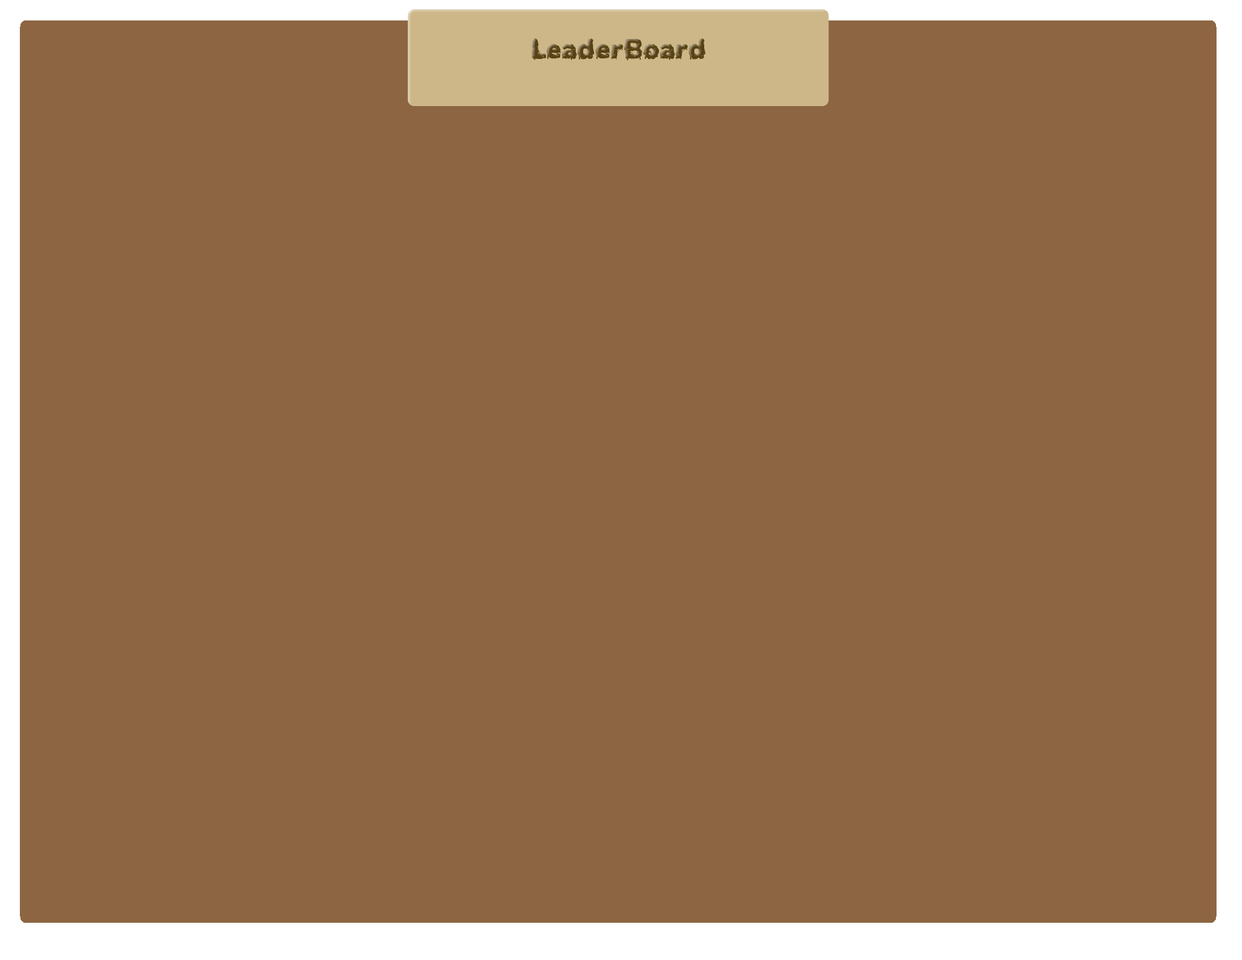
<style>
.page{position:relative;width:1242px;height:960px;background:#8d6542}
.page>*{position:absolute;margin:0}
.t1{font:22.3px "HalloweenNightmareRegular";color:#574216}
</style>
<div class="page">
<p class="t1" style="left:531px;top:38px;width:174px;height:22px">LeaderBoard</p>
</div>
